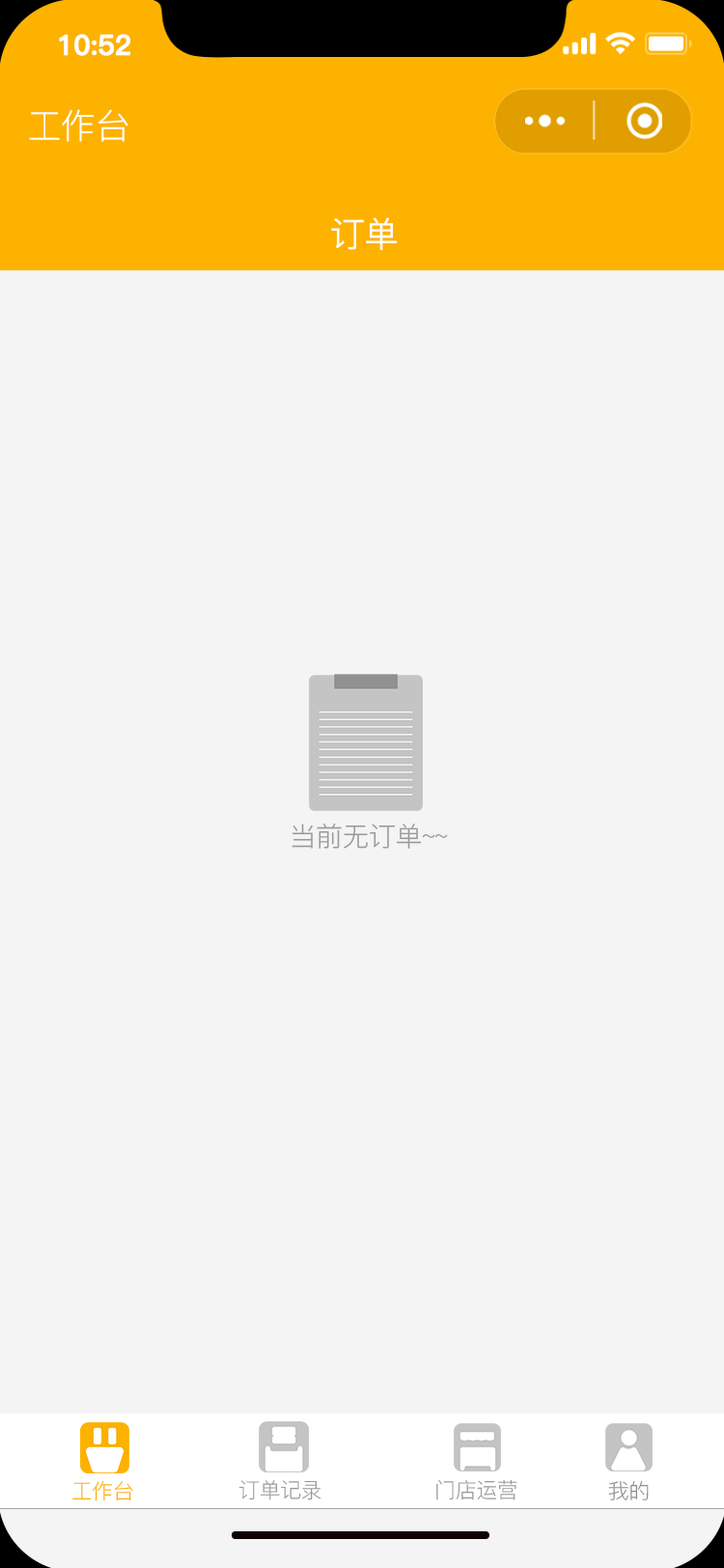
<style>
.page{position:relative;width:724px;height:1568px;background:#f4f4f4}
.page>*{position:absolute;margin:0}
.t1{font:27.5px "PingFang-SC-Bold";letter-spacing:-0.02em;color:#ffffff;font-weight:bold}
.t2{font:34.8px "PingFang-SC-Regular";letter-spacing:-0.02em;color:#ffffff}
.t3{font:34.8px "PingFang-SC-Medium";letter-spacing:-0.02em;color:#fefefe}
.t4{font:27px "PingFang-SC-Regular";letter-spacing:-0.02em;color:#999999}
.t5{font:21.2px "PingFang-SC-Regular";letter-spacing:-0.02em;color:#fdb200}
.t6{font:21.2px "PingFang-SC-Regular";letter-spacing:-0.02em;color:#999999}
.t7{font:21.2px "PingFang-SC-Regular";letter-spacing:-0.02em;color:#919191}
</style>
<div class="page">
<p class="t1" style="left:59px;top:34px;width:71px;height:22px">10:52</p>
<p class="t2" style="left:29px;top:109px;width:99px;height:33px">工作台</p>
<p class="t3" style="left:331px;top:217px;width:66px;height:33px">订单</p>
<p class="t4" style="left:292px;top:824px;width:156px;height:25px">当前无订单~~</p>
<p class="t5" style="left:72px;top:1481px;width:61px;height:20px">工作台</p>
<p class="t6" style="left:238px;top:1480px;width:84px;height:20px">订单记录</p>
<p class="t6" style="left:436px;top:1479px;width:82px;height:21px">门店运营</p>
<p class="t7" style="left:608px;top:1481px;width:41px;height:19px">我的</p>
</div>
